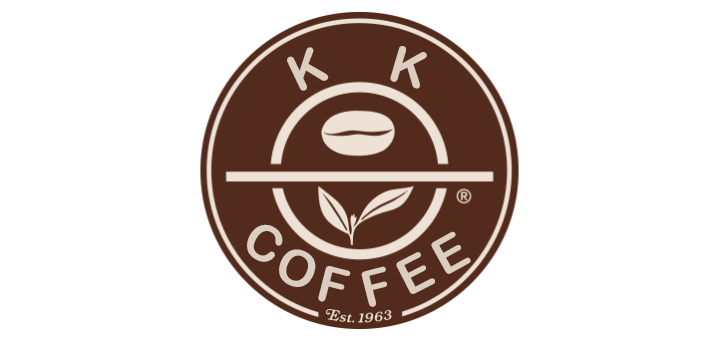
<style>
.page{position:relative;width:720px;height:340px;background:#ffffff}
.page>*{position:absolute;margin:0}
.t1{font:50px "ArialRoundedMTBold";color:#dbcdbf}
</style>
<div class="page">
<p class="t1" style="left:287px;top:47px;width:42px;height:44px;rotate:-26deg">K</p>
<p class="t1" style="left:390px;top:46px;width:37px;height:43px;rotate:16deg">K</p>
<p class="t1" style="left:247px;top:224px;width:36px;height:38px;rotate:30deg">C</p>
<p class="t1" style="left:431px;top:231px;width:40px;height:43px;rotate:-29deg">E</p>
<p class="t1" style="left:279px;top:249px;width:37px;height:38px;rotate:23deg">O</p>
<p class="t1" style="left:396px;top:252px;width:39px;height:42px;rotate:-27deg">E</p>
<p class="t1" style="left:318px;top:266px;width:33px;height:36px;rotate:14deg">F</p>
<p class="t1" style="left:361px;top:266px;width:26px;height:41px;rotate:-14deg">F</p>
</div>
